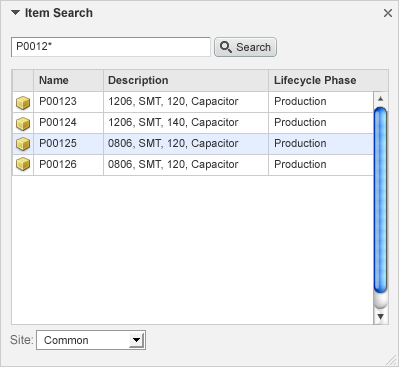
<style>
.page{position:relative;width:399px;height:367px;background:#ffffff}
.page>*{position:absolute;margin:0}
.t1{font:12px "Arial-BoldMT";color:#333333}
.t2{font:11px "ArialMT";color:#333333}
.t3{font:11px/21px "ArialMT";color:#333333}
.t4{font:11px/21px "Arial-BoldMT";color:#333333}
.t5{font:12px "ArialMT";color:#666666}
</style>
<div class="page">
<p class="t1" style="left:25px;top:8px;width:68px;height:10px">Item Search</p>
<p class="t2" style="left:17px;top:42px;width:35px;height:8px">P0012*</p>
<p class="t2" style="left:236px;top:43px;width:35px;height:8px">Search</p>
<p class="t3" style="left:39px;top:76px;width:38px;height:92px"><span class="t4">Name<br></span>P00123<br>P00124<br>P00125<br>P00126</p>
<p class="t3" style="left:108px;top:76px;width:131px;height:95px"><span class="t4">Description<br></span>1206, SMT, 120, Capacitor<br>1206, SMT, 140, Capacitor<br>0806, SMT, 120, Capacitor<br>0806, SMT, 120, Capacitor</p>
<p class="t3" style="left:274px;top:76px;width:82px;height:92px"><span class="t4">Lifecycle Phase<br></span>Production<br>Production<br>Production<br>Production</p>
<p class="t5" style="left:10px;top:335px;width:23px;height:10px">Site:</p>
<p class="t2" style="left:44px;top:336px;width:44px;height:8px">Common</p>
</div>
